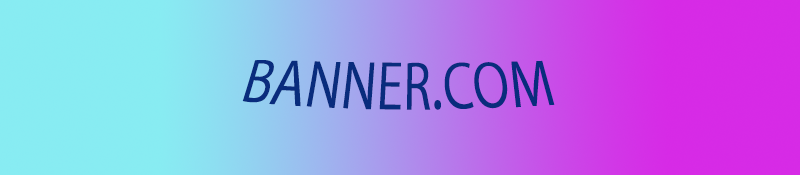
<style>
.page{position:relative;width:800px;height:175px}
.page>*{position:absolute;margin:0}
.t1{font:48px "MyriadPro-Regular";color:#092c7d}
.t2{font:48px "MyriadPro-Regular";color:#09767d}
</style>
<div class="page">
<p class="t1" style="left:242px;top:60px;width:313px;height:50px"><span class="t2"><br>                  </span>BANNER.COM</p>
</div>
